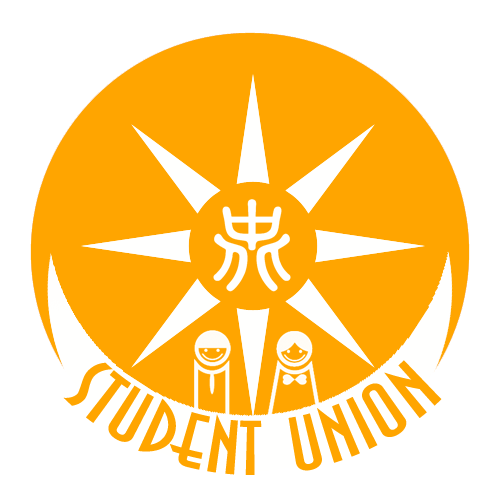
<style>
.page{position:relative;width:500px;height:500px;background:#ffa500}
.page>*{position:absolute;margin:0}
.t1{font:72px "Anastasia";color:#ffa500;text-transform:uppercase}
</style>
<div class="page">
<p class="t1" style="left:63px;top:360px;width:379px;height:115px">STUDENT UNION</p>
</div>
